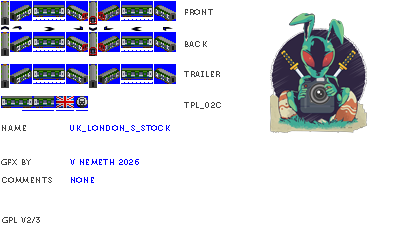
<style>
.page{position:relative;width:400px;height:230px;background:#ffffff}
.page>*{position:absolute;margin:0}
.t1{font:8px "Museo700-Regular";letter-spacing:0.075em;color:#404040;text-transform:uppercase}
.t2{font:8px "Museo700-Regular";letter-spacing:0.075em;color:#0000ff;text-transform:uppercase}
</style>
<div class="page">
<p class="t1" style="left:185px;top:9px;width:28px;height:6px">front</p>
<p class="t1" style="left:185px;top:41px;width:22px;height:6px">back</p>
<p class="t1" style="left:184px;top:71px;width:36px;height:6px">trailer</p>
<p class="t1" style="left:184px;top:102px;width:37px;height:7px">tpl_02c</p>
<p class="t1" style="left:2px;top:125px;width:24px;height:6px">name</p>
<p class="t2" style="left:70px;top:125px;width:100px;height:7px">UK_London_S_Stock</p>
<p class="t1" style="left:1px;top:159px;width:30px;height:6px">gfx by</p>
<p class="t2" style="left:70px;top:159px;width:69px;height:6px">v nemeth 2026</p>
<p class="t1" style="left:2px;top:177px;width:50px;height:6px">comments</p>
<p class="t2" style="left:71px;top:177px;width:23px;height:6px">none</p>
<p class="t1" style="left:2px;top:217px;width:38px;height:6px">gpl v2/3</p>
</div>
